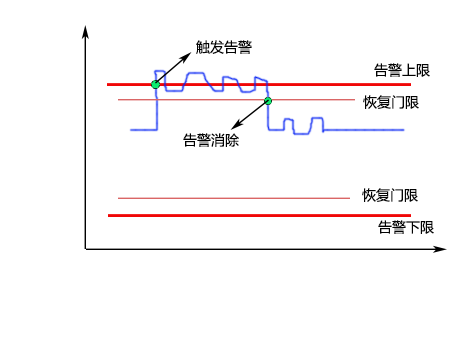
<style>
.page{position:relative;width:454px;height:340px;background:#ffffff}
.page>*{position:absolute;margin:0}
.t1{font:14px "MicrosoftYaHei";color:#030303}
.t2{font:14px "MicrosoftYaHei";color:#000000}
</style>
<div class="page">
<p class="t1" style="left:196px;top:40px;width:56px;height:14px">触发告警</p>
<p class="t1" style="left:374px;top:63px;width:56px;height:14px">告警上限</p>
<p class="t1" style="left:363px;top:95px;width:56px;height:14px">恢复门限</p>
<p class="t2" style="left:183px;top:133px;width:56px;height:14px">告警消除</p>
<p class="t1" style="left:362px;top:188px;width:56px;height:14px">恢复门限</p>
<p class="t1" style="left:378px;top:220px;width:56px;height:14px">告警下限</p>
</div>
